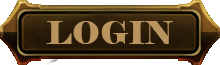
<style>
.page{position:relative;width:220px;height:65px}
.page>*{position:absolute;margin:0}
.t1{font:31px "Elephant-Regular";color:#b9945f}
</style>
<div class="page">
<p class="t1" style="left:46px;top:21px;width:127px;height:23px">LOGIN</p>
</div>
